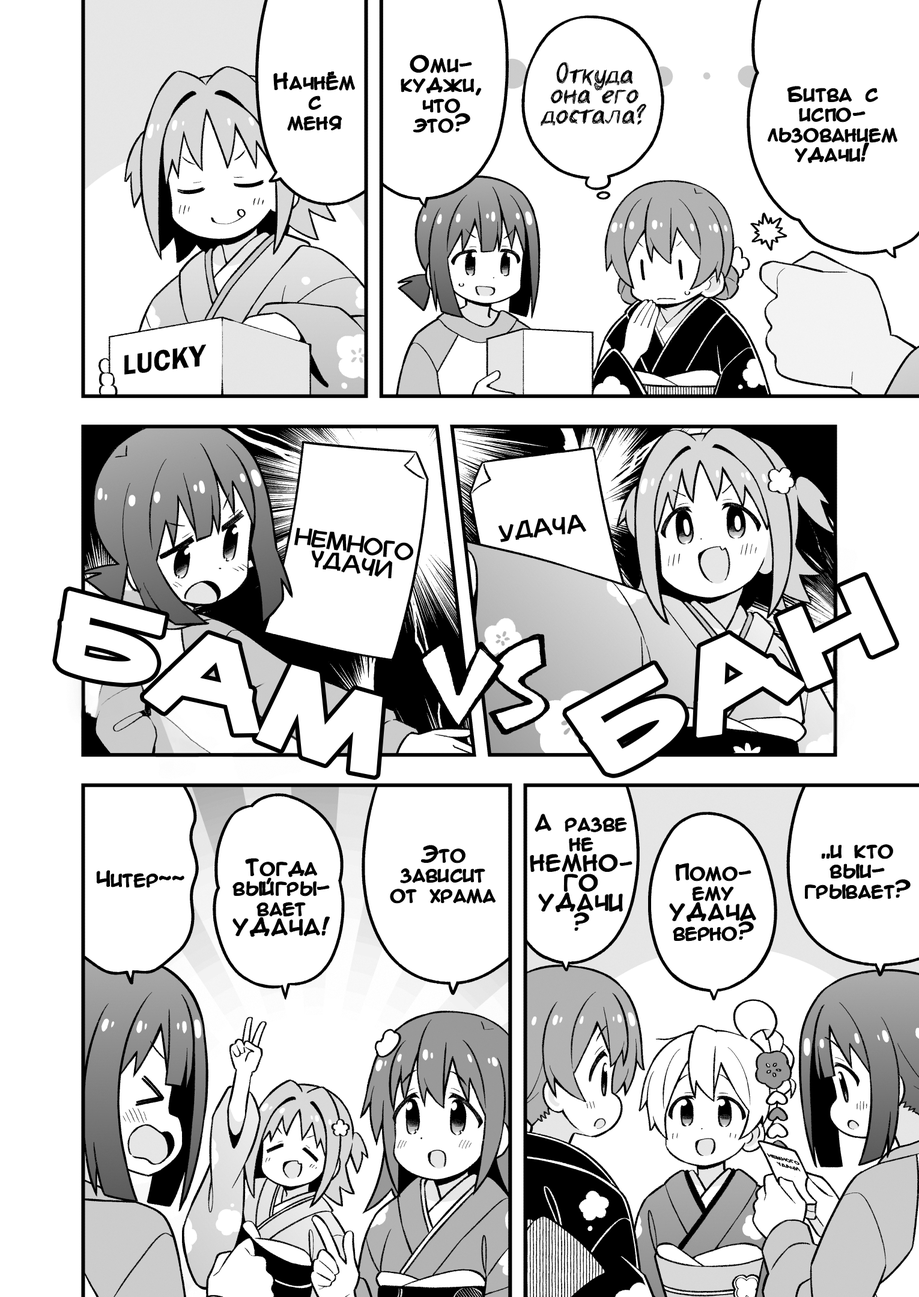
<style>
.page{position:relative;width:919px;height:1297px;background:#ffffff}
.page>*{position:absolute;margin:0}
.t1{font:20px/20px "AnimeAcev3";color:#000000;font-weight:bold}
.t2{font:30px/20px "beermoney";color:#000000}
.t3{font:20px "Mauryssel";color:#000000;font-weight:bold}
.t4{font:20px/20px "Mauryssel";color:#000000;font-weight:bold}
.t5{font:90.1px "Mauryssel-Bold";color:#ffffff;font-weight:bold;scale:1.33 1}
.t6{font:20px "AnimeAcev3";color:#000000;font-weight:bold}
.t7{font:5px/9px "Mauryssel-Bold";color:#000000;font-weight:bold;scale:1.06 1}
</style>
<div class="page">
<p class="t1" style="left:401px;top:55px;width:80px;height:78px;text-align:center">Оми-<br>куджи,<br>что<br>это?</p>
<p class="t2" style="left:541px;top:62px;width:105px;height:64px;text-align:center">Откуда<br>она его<br>достала?</p>
<p class="t1" style="left:274px;top:71px;width:81px;height:59px;text-align:center">Начнём<br>с<br>меня</p>
<p class="t1" style="left:768px;top:86px;width:129px;height:77px;text-align:center">Битва с<br>испо-<br>льзованием<br>удачи!</p>
<p class="t3" style="left:498px;top:515px;width:88px;height:27px;rotate:-6deg">Удача</p>
<p class="t4" style="left:294px;top:528px;width:119px;height:50px;text-align:center;rotate:8deg">Немного<br>удачи</p>
<p class="t5" style="left:566px;top:576px;width:330px;height:198px;rotate:-24deg">БАН</p>
<p class="t5" style="left:56px;top:590px;width:327px;height:186px;rotate:19deg">бам</p>
<p class="t1" style="left:530px;top:815px;width:102px;height:116px;text-align:center">А разве<br>не<br>НЕМНО-<br>ГО<br>УДАЧИ<br>?</p>
<p class="t1" style="left:390px;top:846px;width:106px;height:57px;text-align:center">Это<br>зависит<br>от храма</p>
<p class="t1" style="left:805px;top:845px;width:106px;height:54px;text-align:center">..и кто<br>выи-<br>грывает?</p>
<p class="t1" style="left:233px;top:859px;width:97px;height:78px;text-align:center">Тогда<br>выйгры-<br>вает<br>УДАЧА!</p>
<p class="t1" style="left:670px;top:864px;width:86px;height:77px;text-align:center">Помо-<br>ему<br>УДАЧА<br>верно?</p>
<p class="t6" style="left:97px;top:871px;width:87px;height:17px">Читер~~</p>
<p class="t7" style="left:766px;top:1153px;width:35px;height:19px;text-align:center;rotate:15deg">Немного<br>удачи</p>
</div>
